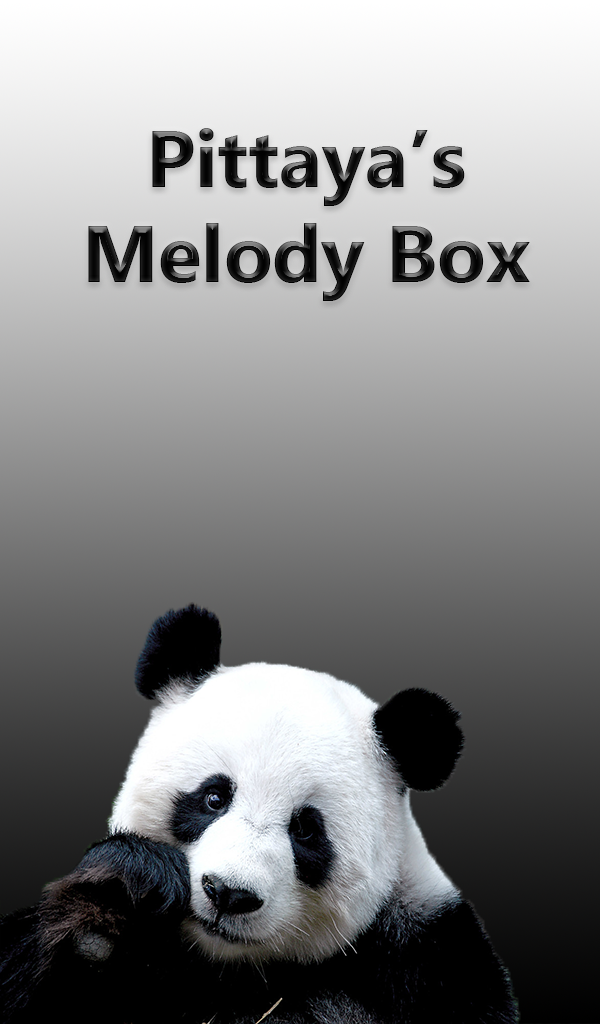
<style>
.page{position:relative;width:600px;height:1024px}
.page>*{position:absolute;margin:0}
.t1{font:79.6px "MyanmarText-Bold";color:#000000}
</style>
<div class="page">
<p class="t1" style="left:88px;top:128px;width:442px;height:173px;text-align:center">Pittaya’s<br>Melody Box</p>
</div>
